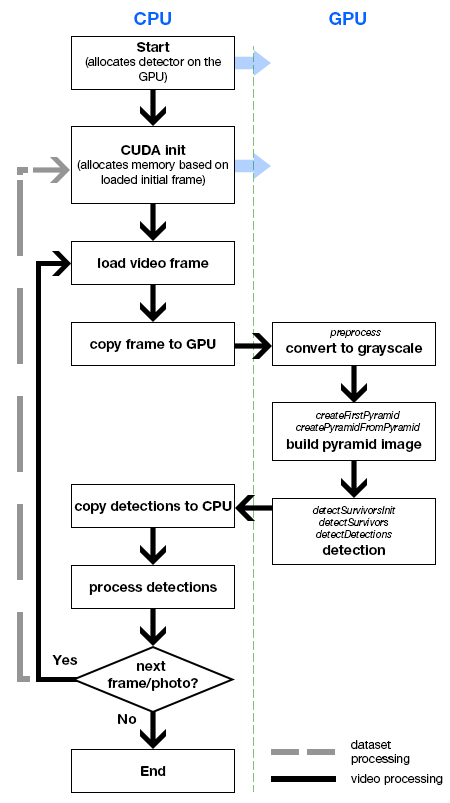
<style>
.page{position:relative;width:450px;height:803px;background:#ffffff}
.page>*{position:absolute;margin:0}
.t1{font:18px "HelveticaNeueLTPro-Bd";color:#0066ff}
.t2{font:12px "HelveticaNeueLTPro-Roman";color:#000000}
.t3{font:14px "HelveticaNeueLTPro-Bd";color:#000000}
.t4{font:14px "HelveticaNeueLTPro-Roman";color:#000000}
.t5{font:10px "HelveticaNeueLTPro-It";color:#000000}
</style>
<div class="page">
<p class="t1" style="left:134px;top:12px;width:37px;height:13px">CPU</p>
<p class="t1" style="left:329px;top:12px;width:37px;height:13px">GPU</p>
<p class="t2" style="left:85px;top:42px;width:136px;height:41px;text-align:center"><span class="t3"><br>Start<br></span>(allocates detector on the GPU)</p>
<p class="t2" style="left:77px;top:145px;width:151px;height:41px;text-align:center"><span class="t4"><br></span><span class="t3">CUDA init<br></span>(allocates memory based on loaded initial frame)</p>
<p class="t3" style="left:98px;top:258px;width:111px;height:10px">load video frame</p>
<p class="t3" style="left:90px;top:339px;width:126px;height:13px">copy frame to GPU</p>
<p class="t5" style="left:330px;top:330px;width:51px;height:8px">preprocess</p>
<p class="t3" style="left:286px;top:343px;width:137px;height:13px">convert to grayscale</p>
<p class="t5" style="left:296px;top:411px;width:125px;height:22px;text-align:center">createFirstPyramid<br>createPyramidFromPyramid</p>
<p class="t3" style="left:286px;top:439px;width:136px;height:13px">build pyramid image</p>
<p class="t3" style="left:74px;top:501px;width:158px;height:13px">copy detections to CPU</p>
<p class="t5" style="left:312px;top:506px;width:84px;height:32px;text-align:center">detectSurvivorsInit<br>detectSurvivors<br>detectDetections</p>
<p class="t3" style="left:322px;top:545px;width:63px;height:10px">detection</p>
<p class="t3" style="left:89px;top:582px;width:128px;height:13px">process detections</p>
<p class="t3" style="left:52px;top:655px;width:26px;height:10px">Yes</p>
<p class="t3" style="left:107px;top:661px;width:91px;height:30px;text-align:center">next <br>frame/photo?</p>
<p class="t3" style="left:118px;top:714px;width:19px;height:10px">No</p>
<p class="t2" style="left:351px;top:740px;width:59px;height:25px">dataset<br>processing</p>
<p class="t3" style="left:141px;top:766px;width:25px;height:10px">End</p>
<p class="t2" style="left:351px;top:774px;width:92px;height:11px">video processing</p>
</div>
